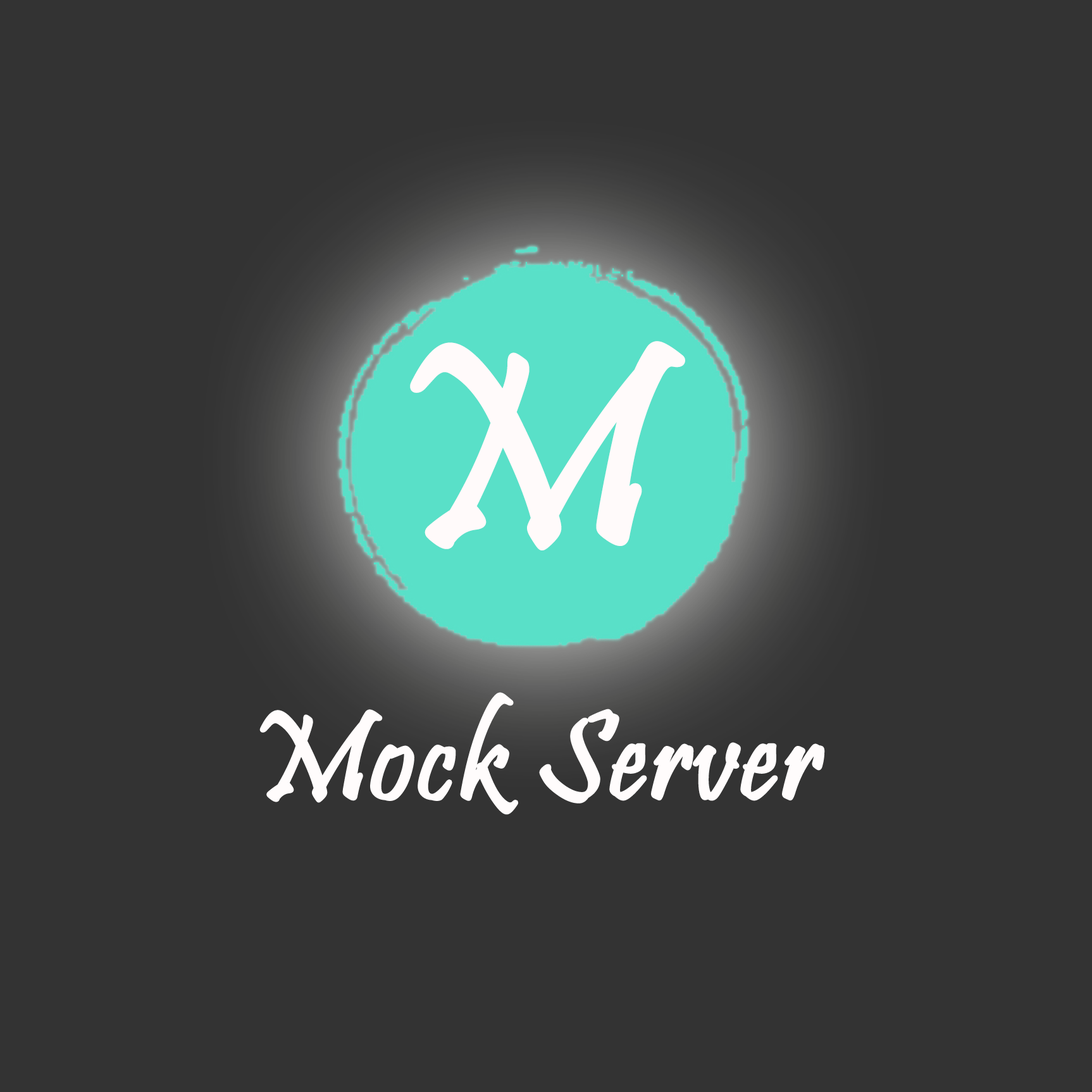
<style>
.page{position:relative;width:1092px;height:1092px;background:#333333}
.page>*{position:absolute;margin:0}
.t1{font:284.7px "Pristina-Regular";color:#fffafa;font-weight:bold}
.t2{font:126.5px "Pristina-Regular";color:#fffcfc;font-weight:bold}
</style>
<div class="page">
<p class="t1" style="left:410px;top:341px;width:275px;height:209px">M</p>
<p class="t2" style="left:259px;top:692px;width:566px;height:123px">Mock Server</p>
</div>
